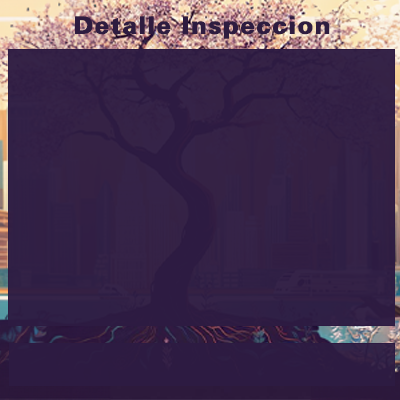
<style>
.page{position:relative;width:400px;height:400px}
.page>*{position:absolute;margin:0}
.t1{font:24px "Univers-Black";letter-spacing:0.05em;color:#2e1c40}
</style>
<div class="page">
<p class="t1" style="left:75px;top:16px;width:255px;height:23px">Detalle Inspeccion</p>
</div>
